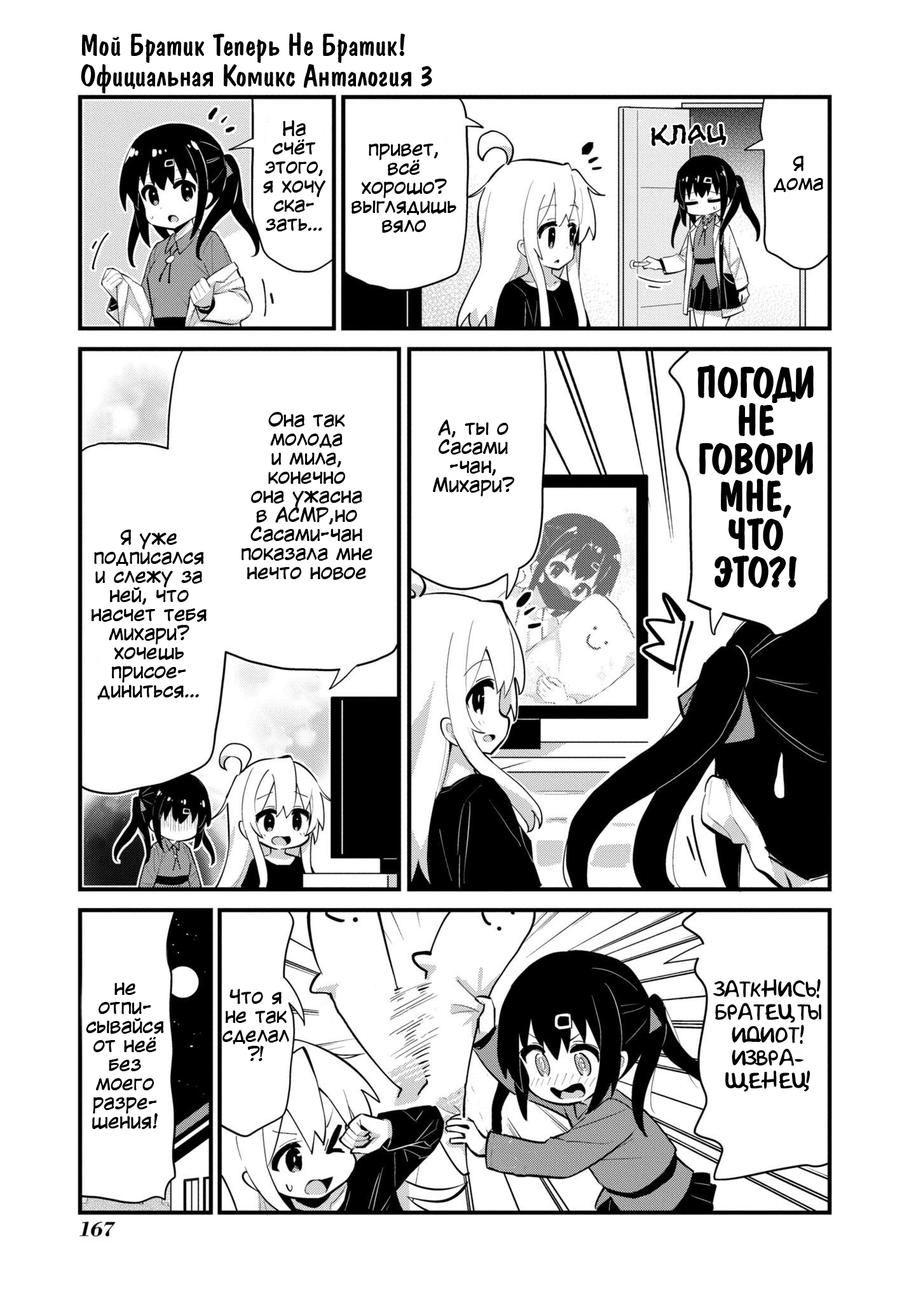
<style>
.page{position:relative;width:916px;height:1302px;background:#ffffff}
.page>*{position:absolute;margin:0}
.t1{font:30.5px/30.5px "ADomIno";color:#000000}
.t2{font:19.1px/19.1px "KuraiVoice2";color:#000000}
.t3{font:30.5px "el_CCEvilSchemes";color:#000000}
.t4{font:41.3px/37.9px "ADomIno";color:#000000}
.t5{font:19.1px/22.9px "AkbarPlain";color:#000000}
</style>
<div class="page">
<p class="t1" style="left:81px;top:32px;width:351px;height:61px">Мой Братик Теперь Не Братик!<br>Официальная Комикс Анталогия 3</p>
<p class="t2" style="left:263px;top:120px;width:63px;height:111px;text-align:center">На счёт этого, я хочу ска-<br>зать…</p>
<p class="t3" style="left:651px;top:123px;width:76px;height:23px;rotate:-4deg">КЛАЦ</p>
<p class="t2" style="left:352px;top:144px;width:104px;height:89px;text-align:center">привет,<br>всё<br>хорошо?  выглядишь вяло</p>
<p class="t2" style="left:774px;top:156px;width:49px;height:37px;text-align:center">Я<br>дома</p>
<p class="t4" style="left:698px;top:366px;width:115px;height:221px;text-align:center">ПОГОДИ<br>НЕ ГОВОРИ<br>МНЕ,<br>ЧТО ЭТО?!</p>
<p class="t2" style="left:241px;top:412px;width:131px;height:168px;text-align:center">Она так<br>молода<br>и мила,<br>конечно<br>она ужасна<br>в АСМР,но<br>Сасами-чан<br>показала мне<br>нечто новое</p>
<p class="t2" style="left:433px;top:420px;width:81px;height:76px;text-align:center">А, ты о<br>Сасами<br>-чан,<br>Михари?</p>
<p class="t2" style="left:91px;top:529px;width:116px;height:171px;text-align:center">Я уже подписался и слежу за ней, что насчет тебя михари? хочешь присое-<br>диниться…</p>
<p class="t2" style="left:86px;top:982px;width:78px;height:147px;text-align:center">не отпи-<br>сывайся от неё без моего разре-<br>шения!</p>
<p class="t2" style="left:222px;top:988px;width:67px;height:73px;text-align:center">Что я не так сделал?!</p>
<p class="t5" style="left:713px;top:979px;width:108px;height:112px;text-align:center">ЗАТКНИСЬ! БРАТЕЦ ТЫ ИДИОТ! ИЗВРА-<br>ЩЕНЕЦ!</p>
</div>
